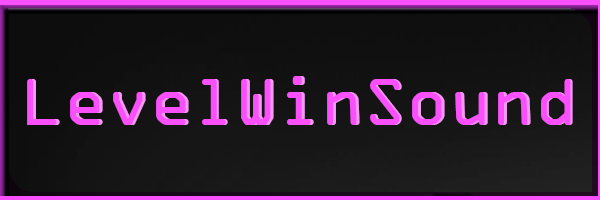
<style>
.page{position:relative;width:600px;height:200px}
.page>*{position:absolute;margin:0}
.t1{font:70.8px "OCRAExtended";color:#f950fb}
.t2{font:70.8px "OCRAExtended"}
</style>
<div class="page">
<p class="t1" style="left:27px;top:76px;width:544px;height:49px">LevelWinSound</p>
<p class="t2" style="left:30px;top:76px;width:543px;height:49px">LevelWinSound</p>
</div>
